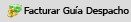
<style>
.page{position:relative;width:131px;height:22px;background:#dcdcdc}
.page>*{position:absolute;margin:0}
.t1{font:10px "Tahoma";color:#060606}
</style>
<div class="page">
<p class="t1" style="left:24px;top:6px;width:105px;height:10px">Facturar Guía Despacho</p>
</div>
